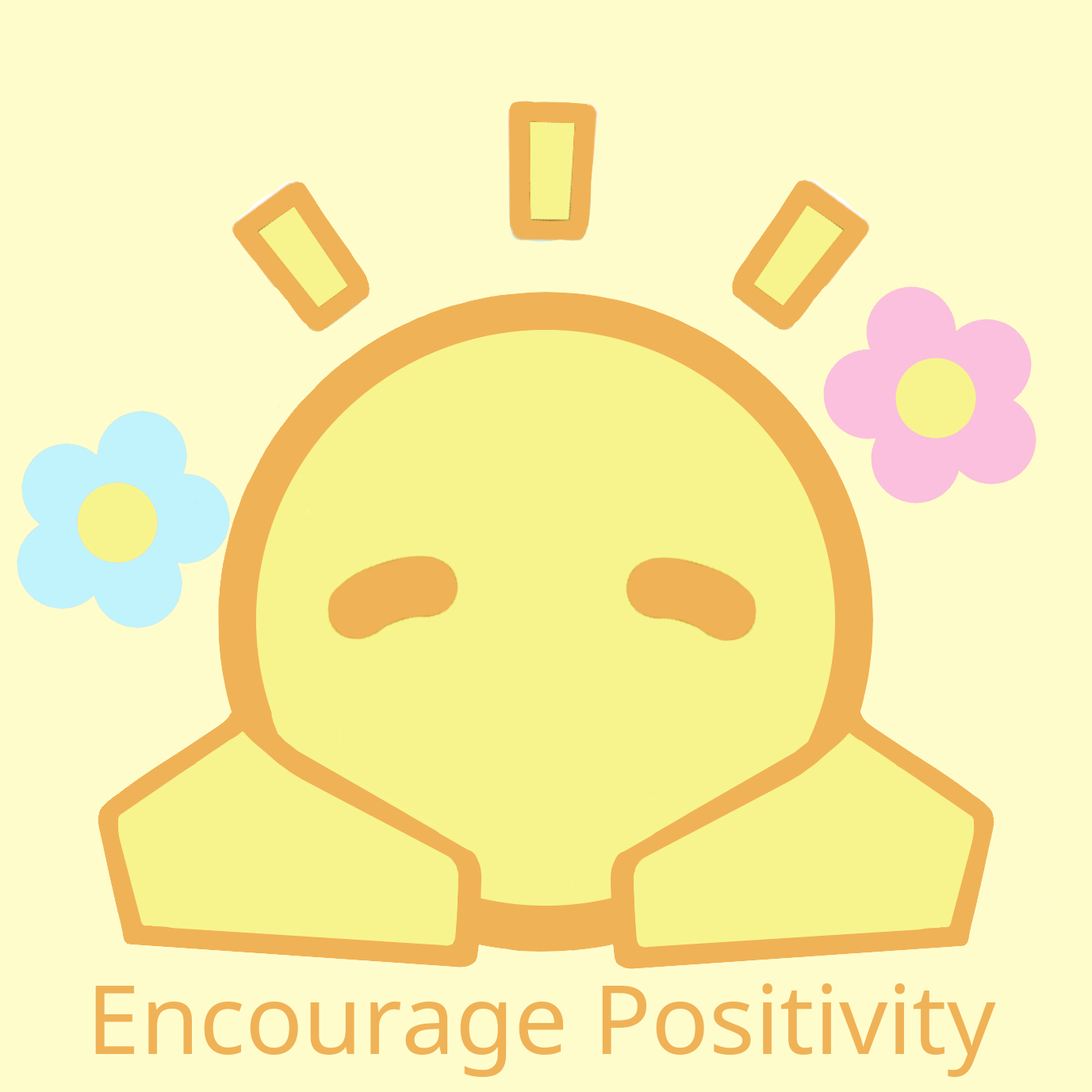
<style>
.page{position:relative;width:1092px;height:1092px;background:#fffccc}
.page>*{position:absolute;margin:0}
.t1{font:95.8px "NotoSans";color:#f0b256}
</style>
<div class="page">
<p class="t1" style="left:95px;top:983px;width:901px;height:94px">Encourage Positivity</p>
</div>
